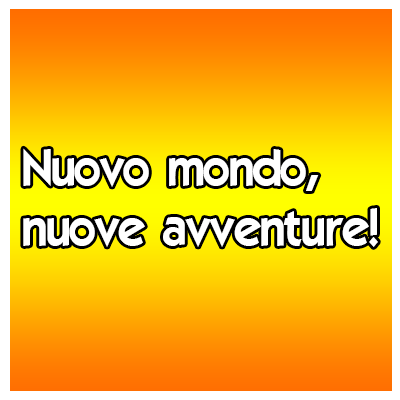
<style>
.page{position:relative;width:400px;height:400px}
.page>*{position:absolute;margin:0}
.t1{font:50px "ELEGANCE";color:#ffffff}
</style>
<div class="page">
<p class="t1" style="left:23px;top:148px;width:355px;height:99px">Nuovo mondo,<br>nuove avventure!</p>
</div>
